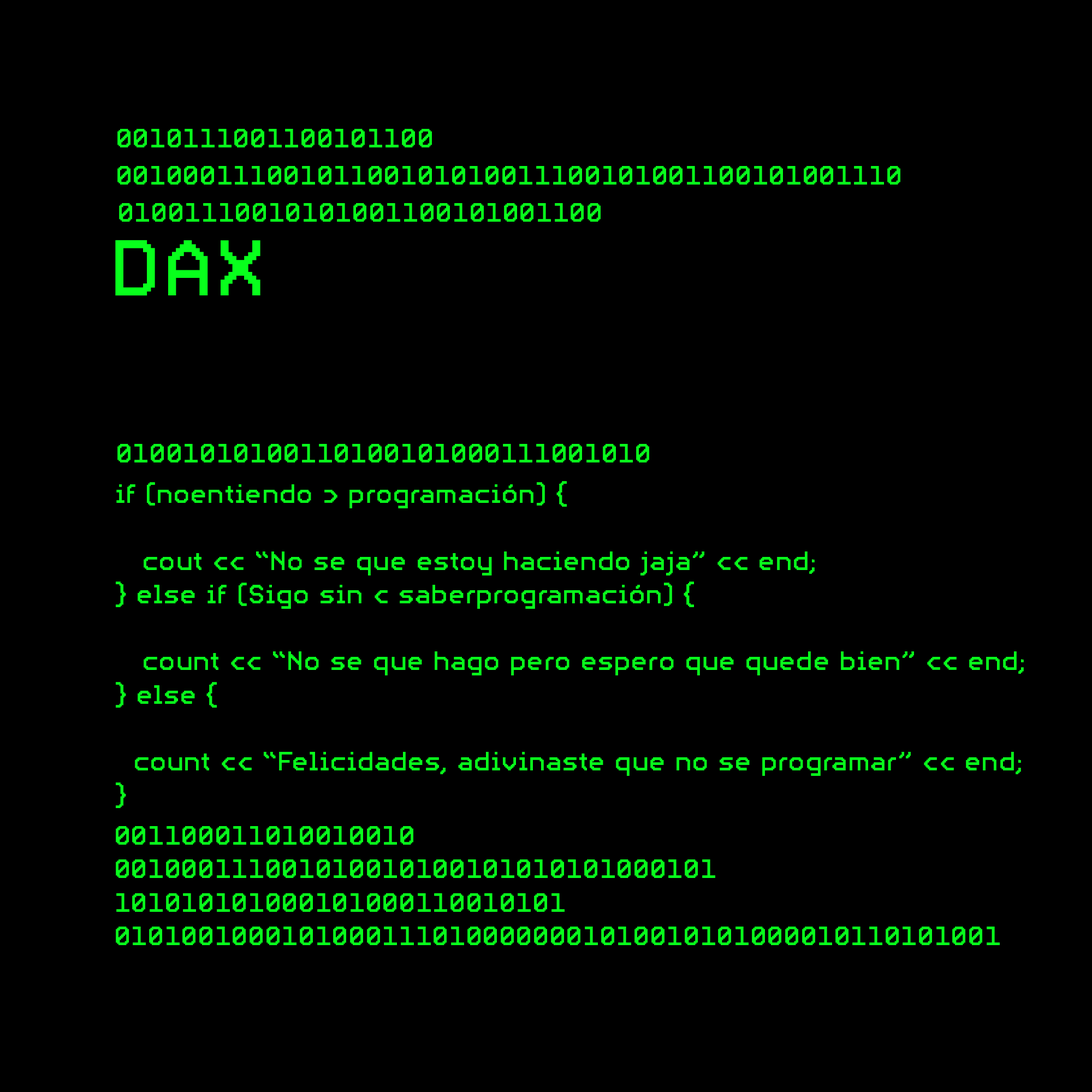
<style>
.page{position:relative;width:1092px;height:1092px;background:#000000}
.page>*{position:absolute;margin:0}
.t1{font:27.9px "PFVideotext-Regular";color:#08ff1c}
.t2{font:83.7px "PFVideotext-Regular";color:#08ff1c}
</style>
<div class="page">
<p class="t1" style="left:117px;top:129px;width:315px;height:18px">0010111001100101100</p>
<p class="t1" style="left:117px;top:166px;width:783px;height:19px">00100011100101100101010011100101001100101001110</p>
<p class="t1" style="left:119px;top:203px;width:482px;height:19px">01001110010101001100101001100</p>
<p class="t2" style="left:115px;top:240px;width:145px;height:56px">DAX</p>
<p class="t1" style="left:117px;top:444px;width:532px;height:18px">01001010100110100101000111001010</p>
<p class="t1" style="left:116px;top:481px;width:908px;height:327px">if (noentiendo &gt; programación) {<br><br>   cout &lt;&lt; “No se que estoy haciendo jaja” &lt;&lt; end;<br>} else if (Sigo sin &lt; saberprogramación) {<br><br>   count &lt;&lt; “No se que hago pero espero que quede bien” &lt;&lt; end;<br>} else {<br> <br>  count &lt;&lt; “Felicidades, adivinaste que no se programar” &lt;&lt; end;<br>}</p>
<p class="t1" style="left:116px;top:826px;width:884px;height:119px">001100011010010010<br>001000111001010010100101010101000101<br>101010101000101000110010101<br>01010010001010001110100000001010010101000010110101001</p>
</div>
